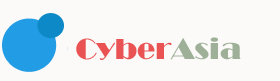
<style>
.page{position:relative;width:280px;height:81px;background:#fbfaf9}
.page>*{position:absolute;margin:0}
.t1{font:30px "Broadway";color:#ea5354}
.t2{font:30px "Broadway";color:#9fb098}
</style>
<div class="page">
<p class="t1" style="left:76px;top:37px;width:165px;height:23px">Cyber<span class="t2">Asia</span></p>
</div>
